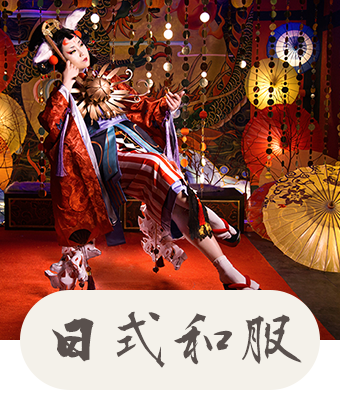
<style>
.page{position:relative;width:340px;height:400px}
.page>*{position:absolute;margin:0}
.t1{font:66.1px "KouzanBrushFontGyousyo";color:#59504d}
</style>
<div class="page">
<p class="t1" style="left:52px;top:311px;width:250px;height:57px">日式和服</p>
</div>
